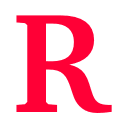
<style>
.page{position:relative;width:128px;height:128px;background:#ffffff}
.page>*{position:absolute;margin:0}
.t1{font:144px "Charter-Bold";color:#ff0036}
</style>
<div class="page">
<p class="t1" style="left:16px;top:15px;width:96px;height:98px">R</p>
</div>
